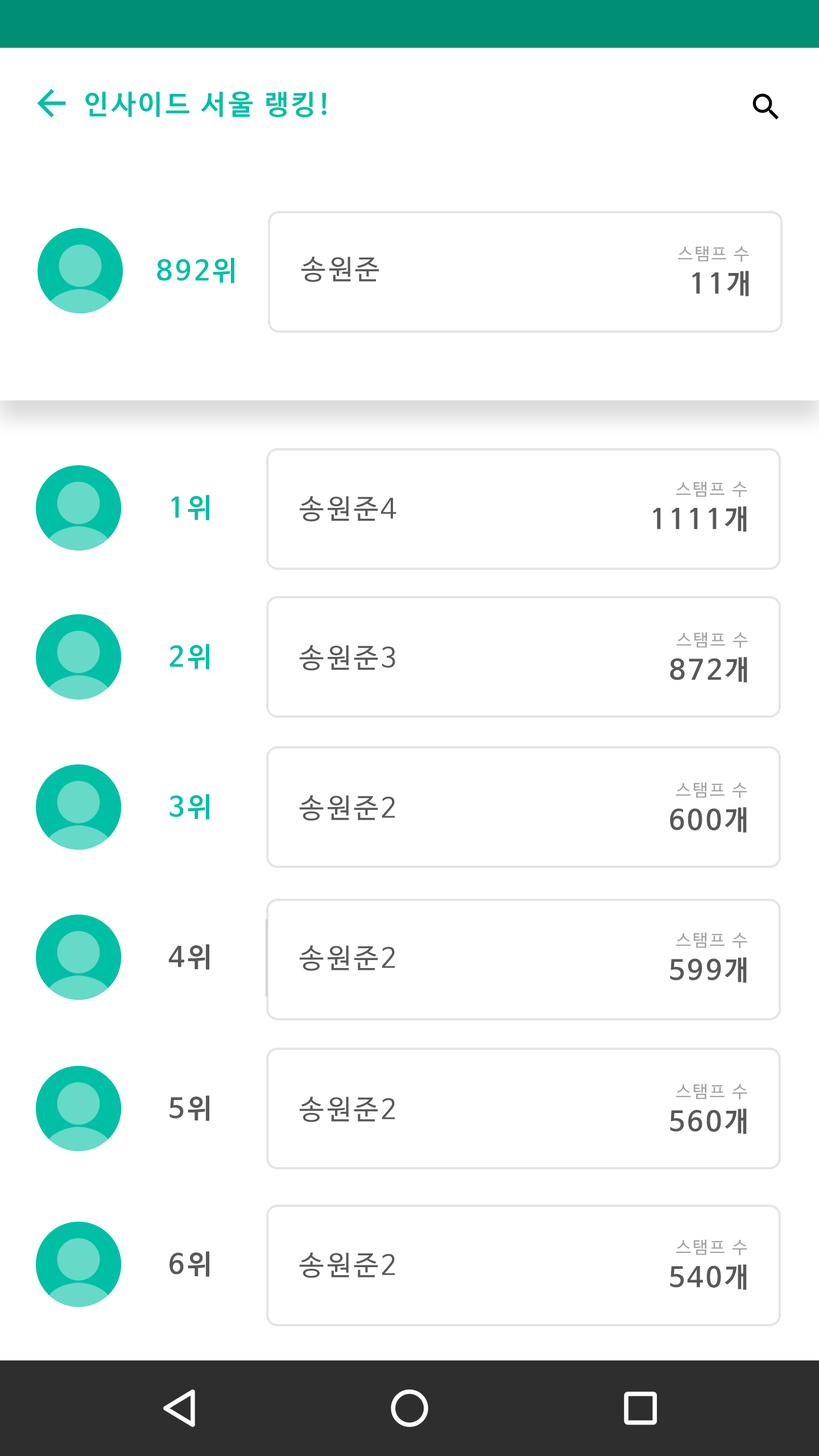
<style>
.page{position:relative;width:819px;height:1456px;background:#ffffff}
.page>*{position:absolute;margin:0}
.t1{font:27.3px "NanumBarunGothicBold";letter-spacing:0.1em;color:#00bfa5}
.t2{font:17.1px "NanumBarunGothic";letter-spacing:0.1em;color:#a3a3a3}
.t3{font:27.3px "NanumBarunGothic";letter-spacing:0.1em;color:#585858}
.t4{font:27.3px "NanumBarunGothicBold";letter-spacing:0.1em;color:#585858}
</style>
<div class="page">
<p class="t1" style="left:85px;top:92px;width:241px;height:26px">인사이드 서울 랭킹!</p>
<p class="t2" style="left:677px;top:246px;width:72px;height:16px">스탬프 수</p>
<p class="t1" style="left:157px;top:258px;width:77px;height:25px">892위</p>
<p class="t3" style="left:301px;top:257px;width:78px;height:25px">송원준</p>
<p class="t4" style="left:692px;top:271px;width:57px;height:25px">11개</p>
<p class="t2" style="left:676px;top:481px;width:71px;height:16px">스탬프 수</p>
<p class="t1" style="left:171px;top:495px;width:38px;height:25px">1위</p>
<p class="t3" style="left:299px;top:496px;width:97px;height:26px">송원준4</p>
<p class="t4" style="left:653px;top:506px;width:94px;height:26px">1111개</p>
<p class="t2" style="left:676px;top:632px;width:72px;height:16px">스탬프 수</p>
<p class="t1" style="left:169px;top:644px;width:40px;height:25px">2위</p>
<p class="t3" style="left:299px;top:645px;width:96px;height:26px">송원준3</p>
<p class="t4" style="left:670px;top:657px;width:77px;height:25px">872개</p>
<p class="t2" style="left:676px;top:782px;width:71px;height:16px">스탬프 수</p>
<p class="t1" style="left:169px;top:794px;width:40px;height:26px">3위</p>
<p class="t3" style="left:299px;top:795px;width:96px;height:26px">송원준2</p>
<p class="t4" style="left:670px;top:807px;width:77px;height:26px">600개</p>
<p class="t2" style="left:676px;top:932px;width:71px;height:16px">스탬프 수</p>
<p class="t4" style="left:168px;top:944px;width:41px;height:26px">4위</p>
<p class="t3" style="left:299px;top:945px;width:96px;height:26px">송원준2</p>
<p class="t4" style="left:670px;top:957px;width:77px;height:26px">599개</p>
<p class="t2" style="left:676px;top:1083px;width:71px;height:16px">스탬프 수</p>
<p class="t4" style="left:169px;top:1095px;width:40px;height:26px">5위</p>
<p class="t3" style="left:299px;top:1097px;width:96px;height:25px">송원준2</p>
<p class="t4" style="left:670px;top:1108px;width:77px;height:26px">560개</p>
<p class="t2" style="left:676px;top:1239px;width:71px;height:16px">스탬프 수</p>
<p class="t4" style="left:169px;top:1251px;width:40px;height:26px">6위</p>
<p class="t3" style="left:299px;top:1252px;width:96px;height:26px">송원준2</p>
<p class="t4" style="left:670px;top:1264px;width:77px;height:26px">540개</p>
</div>
